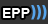
<style>
.page{position:relative;width:48px;height:24px;background:#333333}
.page>*{position:absolute;margin:0}
.t1{font:14px "Arial-BoldMT";color:#ffffff}
</style>
<div class="page">
<p class="t1" style="left:3px;top:8px;width:27px;height:10px">EPP</p>
</div>
